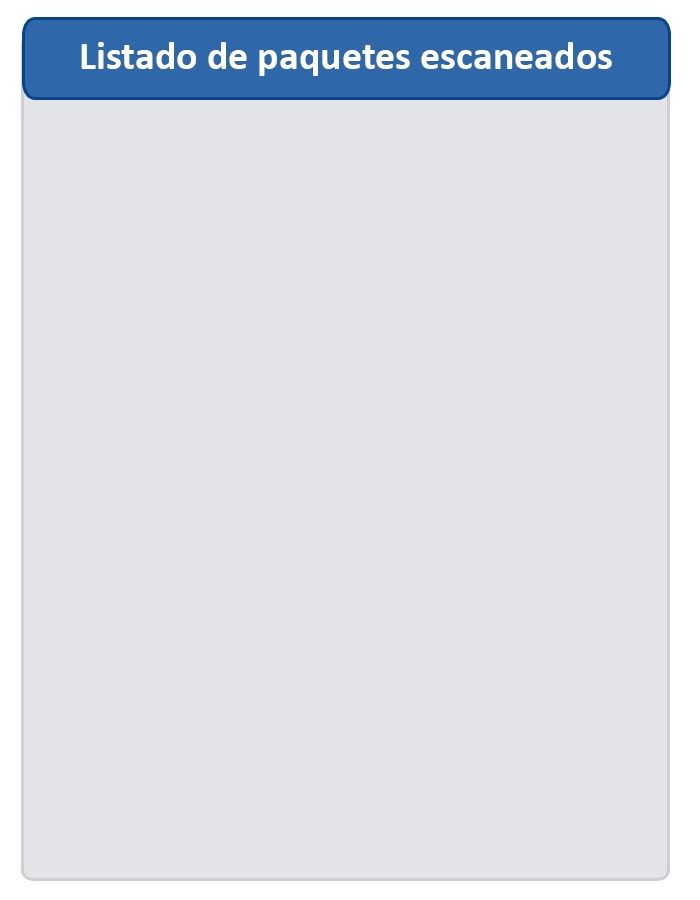
<style>
.page{position:relative;width:700px;height:900px;background:#e2e4e7}
.page>*{position:absolute;margin:0}
.t1{font:40.1px "Calibri-Bold";color:#ffffff}
</style>
<div class="page">
<p class="t1" style="left:81px;top:42px;width:531px;height:34px">Listado de paquetes escaneados</p>
</div>
